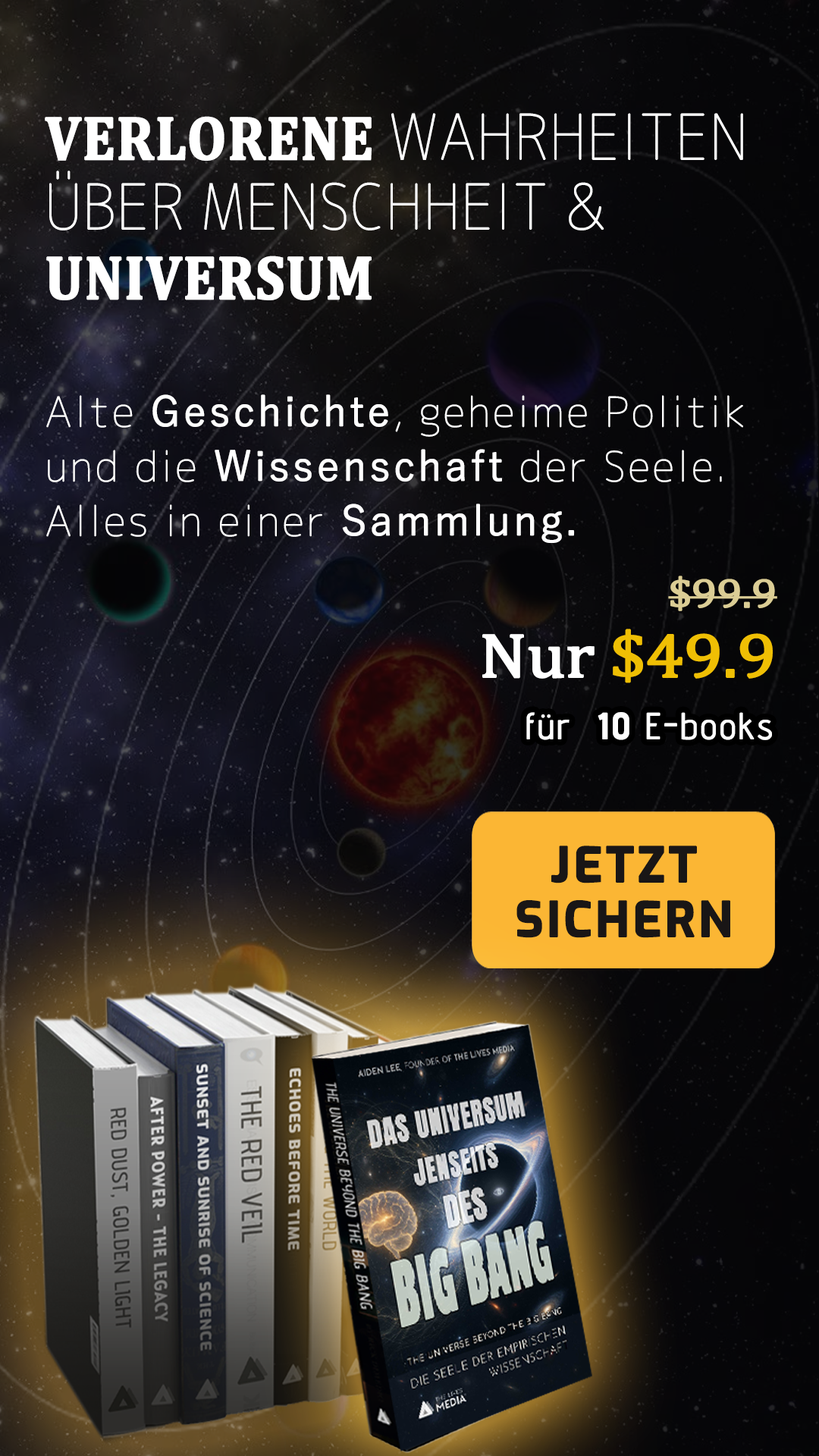
<style>
.page{position:relative;width:819px;height:1456px}
.page>*{position:absolute;margin:0}
.t1{font:62.2px/69.8px "Chogokuboso-Gothic";letter-spacing:0.005em;color:#ffffff;font-weight:bold;scale:0.9 1}
.t2{font:62.2px/69.8px "Cambria-Bold";letter-spacing:0.005em;color:#ffffff;font-weight:bold;scale:0.9 1}
.t3{font:40.9px/54.6px "Chogokuboso-Gothic";letter-spacing:0.05em;color:#ffffff;font-weight:bold}
.t4{font:40.9px/54.6px "YuGothic-Regular";letter-spacing:0.05em;color:#ffffff;font-weight:bold}
.t5{font:40.9px/69.8px "Cambria";letter-spacing:-0.025em;color:#dbcd95;font-weight:bold;scale:1.11 1}
.t6{font:62.8px/69.8px "Cambria";letter-spacing:-0.025em;color:#ffffff;font-weight:bold;scale:1.11 1}
.t7{font:62.8px/69.8px "Cambria";letter-spacing:-0.025em;color:#efbf04;font-weight:bold;scale:1.11 1}
.t8{font:36.4px "AdventPro-Regular";letter-spacing:0.05em;color:#ffffff;font-weight:bold}
.t9{font:36.4px "AdventPro-Bold";letter-spacing:0.05em;color:#ffffff;font-weight:bold}
.t10{font:47.8px/54.6px "Exo-Bold";letter-spacing:0.05em;color:#191616;font-weight:bold}
</style>
<div class="page">
<p class="t1" style="left:45px;top:113px;width:698px;height:187px"><span class="t2">VERLORENE </span>WAHRHEITEN ÜBER MENSCHHEIT &amp; <span class="t2">UNIVERSUM</span></p>
<p class="t3" style="left:46px;top:394px;width:697px;height:149px">Alte <span class="t4">Geschichte</span>, geheime Politik und die <span class="t4">Wissenschaft</span> der Seele. Alles in einer <span class="t4">Sammlung.</span></p>
<p class="t5" style="left:482px;top:576px;width:295px;height:107px;text-align:right">$99.9 <br><span class="t6">Nur</span><span class="t7"> $49.9</span></p>
<p class="t8" style="left:526px;top:712px;width:246px;height:28px">für  <span class="t9">10</span> E-books</p>
<p class="t10" style="left:516px;top:846px;width:214px;height:92px;text-align:center">JETZT SICHERN</p>
</div>
